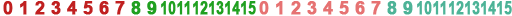
<style>
.page{position:relative;width:512px;height:16px;background:#ffffff}
.page>*{position:absolute;margin:0}
.t1{font:18px "Arial-BoldMT";letter-spacing:-0.02em;color:#c02020;font-weight:bold}
.t2{font:18px "Arial-BoldMT";letter-spacing:-0.02em;color:#20a020;font-weight:bold}
.t3{font:18px "Arial-BoldMT";letter-spacing:0.01em;color:#20a020;font-weight:bold;scale:0.75 1}
.t4{font:18px "Arial-BoldMT";letter-spacing:-0.02em;color:#e67272;font-weight:bold}
.t5{font:18px "Arial-BoldMT";letter-spacing:-0.02em;color:#4db397;font-weight:bold}
.t6{font:18px "Arial-BoldMT";letter-spacing:0.01em;color:#4db397;font-weight:bold;scale:0.75 1}
</style>
<div class="page">
<p class="t1" style="left:3px;top:1px;width:10px;height:14px">0</p>
<p class="t1" style="left:20px;top:1px;width:7px;height:14px">1</p>
<p class="t1" style="left:35px;top:1px;width:10px;height:14px">2</p>
<p class="t1" style="left:51px;top:1px;width:10px;height:14px">3</p>
<p class="t1" style="left:67px;top:1px;width:10px;height:14px">4</p>
<p class="t1" style="left:83px;top:1px;width:10px;height:14px">5</p>
<p class="t1" style="left:99px;top:1px;width:10px;height:14px">6</p>
<p class="t1" style="left:115px;top:1px;width:10px;height:14px">7</p>
<p class="t2" style="left:131px;top:1px;width:10px;height:14px">8</p>
<p class="t2" style="left:147px;top:1px;width:10px;height:14px">9</p>
<p class="t3" style="left:161px;top:1px;width:15px;height:14px">10</p>
<p class="t3" style="left:177px;top:1px;width:13px;height:14px">11</p>
<p class="t3" style="left:193px;top:1px;width:15px;height:14px">12</p>
<p class="t3" style="left:209px;top:1px;width:15px;height:14px">13</p>
<p class="t3" style="left:225px;top:1px;width:15px;height:14px">14</p>
<p class="t3" style="left:241px;top:1px;width:15px;height:14px">15</p>
<p class="t4" style="left:259px;top:1px;width:10px;height:14px">0</p>
<p class="t4" style="left:276px;top:1px;width:7px;height:14px">1</p>
<p class="t4" style="left:291px;top:1px;width:10px;height:14px">2</p>
<p class="t4" style="left:307px;top:1px;width:10px;height:14px">3</p>
<p class="t4" style="left:323px;top:1px;width:10px;height:14px">4</p>
<p class="t4" style="left:339px;top:1px;width:10px;height:14px">5</p>
<p class="t4" style="left:355px;top:1px;width:10px;height:14px">6</p>
<p class="t4" style="left:371px;top:1px;width:10px;height:14px">7</p>
<p class="t5" style="left:387px;top:1px;width:10px;height:14px">8</p>
<p class="t5" style="left:403px;top:1px;width:10px;height:14px">9</p>
<p class="t6" style="left:417px;top:1px;width:15px;height:14px">10</p>
<p class="t6" style="left:433px;top:1px;width:13px;height:14px">11</p>
<p class="t6" style="left:449px;top:1px;width:15px;height:14px">12</p>
<p class="t6" style="left:465px;top:1px;width:15px;height:14px">13</p>
<p class="t6" style="left:481px;top:1px;width:15px;height:14px">14</p>
<p class="t6" style="left:497px;top:1px;width:15px;height:14px">15</p>
</div>
